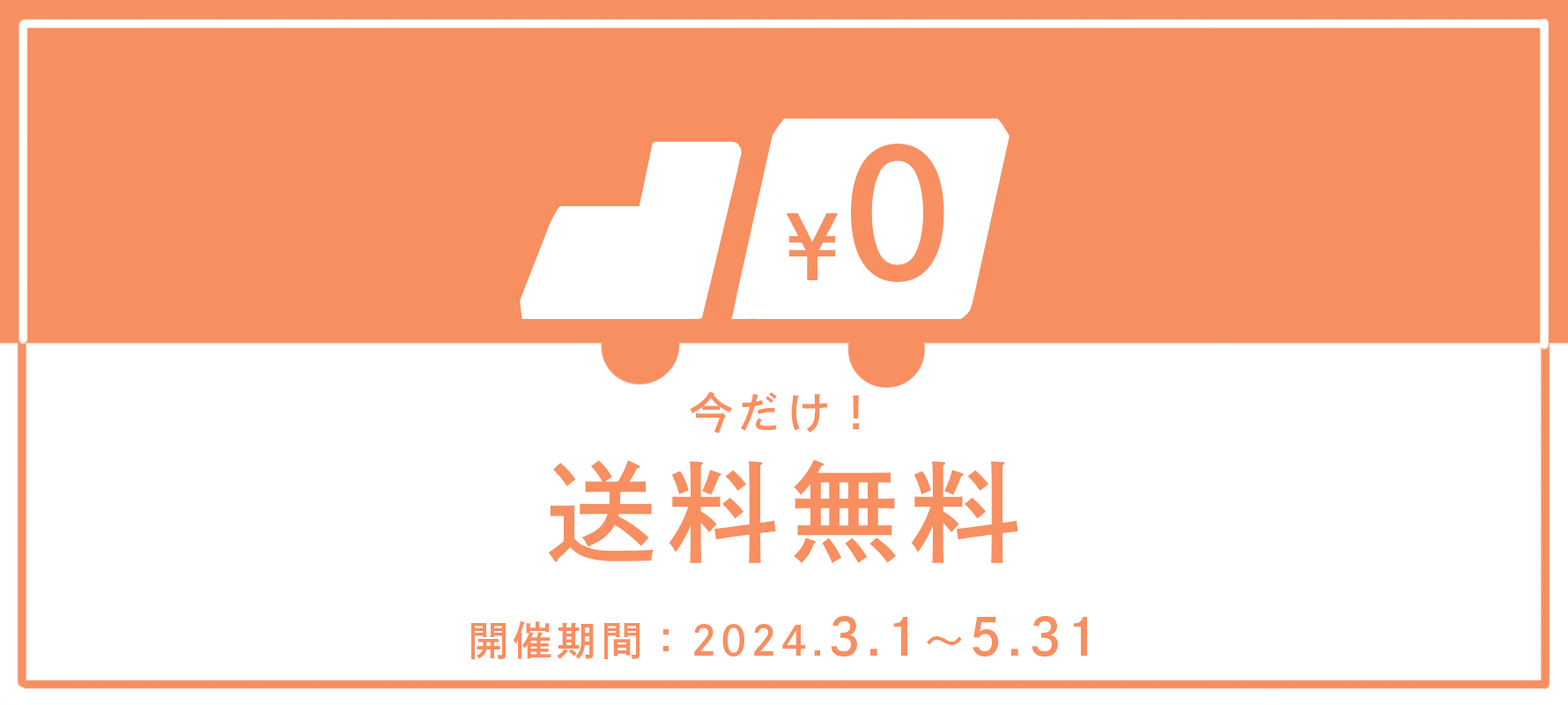
<style>
.page{position:relative;width:1568px;height:705px;background:#ffffff}
.page>*{position:absolute;margin:0}
.t1{font:88.1px "DNPShueiGoGinStd-B";color:#f78f61}
.t2{font:176.2px "DNPShueiGoGinStd-B";color:#f78f61}
.t3{font:44px "DNPShueiGoGinStd-B";letter-spacing:0.1em;color:#f78f61}
.t4{font:110.1px "DNPShueiGoGinStd-B";letter-spacing:0.1em;color:#f78f61}
.t5{font:40.4px "DNPShueiGoGinStd-B";letter-spacing:0.1em;color:#f78f61}
.t6{font:51.4px "DNPShueiGoGinStd-B";letter-spacing:0.1em;color:#f78f61}
</style>
<div class="page">
<p class="t1" style="left:786px;top:144px;width:158px;height:138px">¥<span class="t2">0</span></p>
<p class="t3" style="left:690px;top:391px;width:169px;height:42px">今だけ！</p>
<p class="t4" style="left:548px;top:459px;width:470px;height:104px">送料無料</p>
<p class="t5" style="left:470px;top:616px;width:617px;height:44px">開催期間：2024.<span class="t6">3.1</span>〜<span class="t6">5.31</span></p>
</div>
